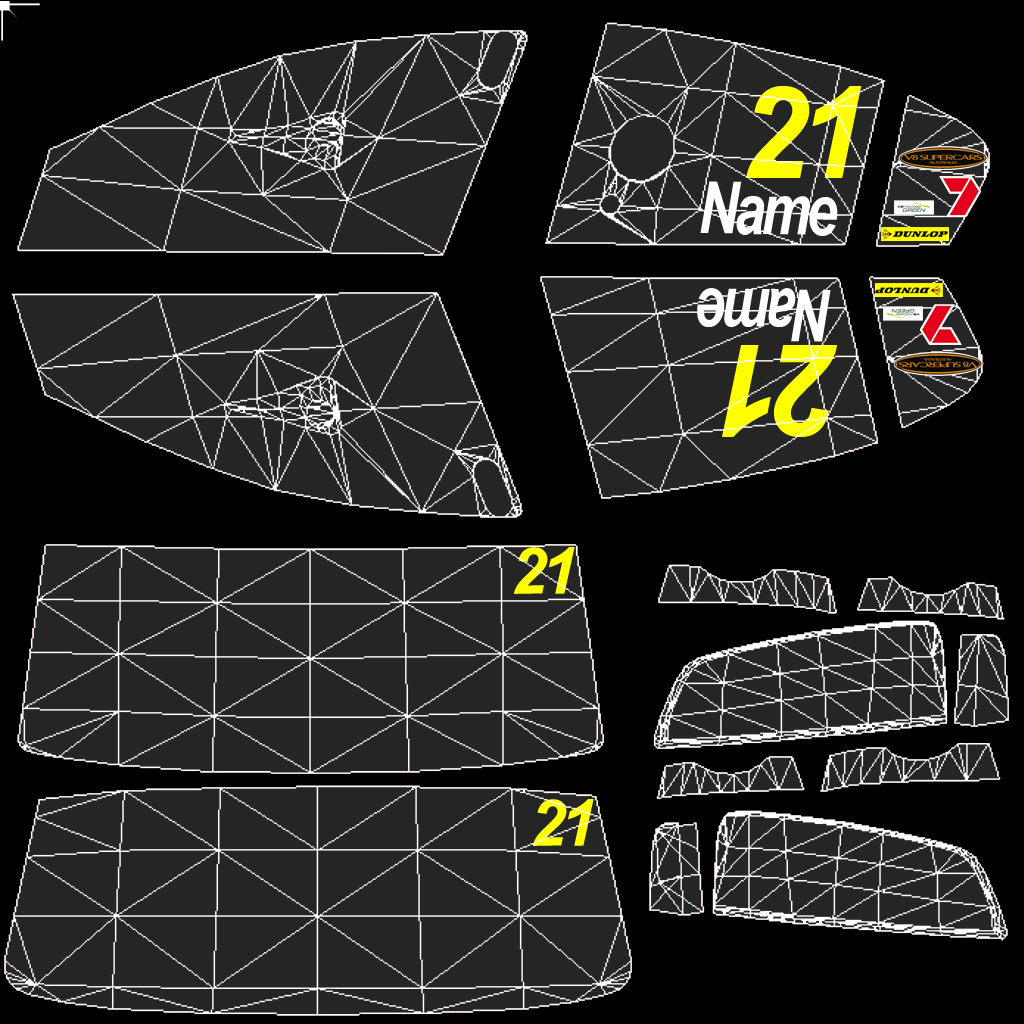
<style>
.page{position:relative;width:1024px;height:1024px;background:#262526}
.page>*{position:absolute;margin:0}
.t1{font:128.4px "Arial-BoldItalicMT";letter-spacing:-0.075em;color:#ffff00;scale:0.96 1}
.t2{font:71.9px "Arial-BoldItalicMT";letter-spacing:-0.075em;color:#ffffff;scale:0.78 1}
.t3{font:71.9px "Arial-BoldItalicMT";letter-spacing:-0.075em;color:#ffffff;scale:0.76 1}
.t4{font:64.4px "Arial-BoldItalicMT";letter-spacing:-0.075em;color:#ffff00}
</style>
<div class="page">
<p class="t1" style="left:746px;top:86px;width:116px;height:92px">21</p>
<p class="t2" style="left:700px;top:181px;width:138px;height:55px;rotate:1deg">Name</p>
<p class="t3" style="left:697px;top:288px;width:134px;height:54px;rotate:-180deg">Name</p>
<p class="t1" style="left:722px;top:345px;width:115px;height:92px;rotate:180deg">21</p>
<p class="t4" style="left:514px;top:547px;width:61px;height:47px;rotate:-1deg">21</p>
<p class="t4" style="left:533px;top:799px;width:61px;height:47px;rotate:-1deg">21</p>
</div>
